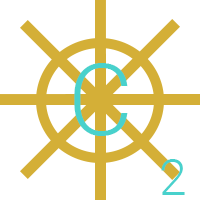
<style>
.page{position:relative;width:200px;height:200px;background:#ffffff}
.page>*{position:absolute;margin:0}
.t1{font:100px "Roboto-Light";color:#48d1cc}
.t2{font:50px "Roboto-Light";color:#48d1cc}
</style>
<div class="page">
<p class="t1" style="left:74px;top:63px;width:54px;height:73px">C</p>
<p class="t2" style="left:161px;top:159px;width:24px;height:36px">2</p>
</div>
